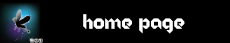
<style>
.page{position:relative;width:230px;height:43px;background:#000000}
.page>*{position:absolute;margin:0}
.t1{font:20px "Origram";color:#ffffff}
</style>
<div class="page">
<p class="t1" style="left:83px;top:14px;width:102px;height:20px">home page</p>
</div>
